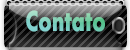
<style>
.page{position:relative;width:130px;height:50px}
.page>*{position:absolute;margin:0}
.t1{font:30px "Aharoni-Bold";scale:0.72 1}
</style>
<div class="page">
<p class="t1" style="left:26px;top:10px;width:79px;height:22px">Contato</p>
</div>
